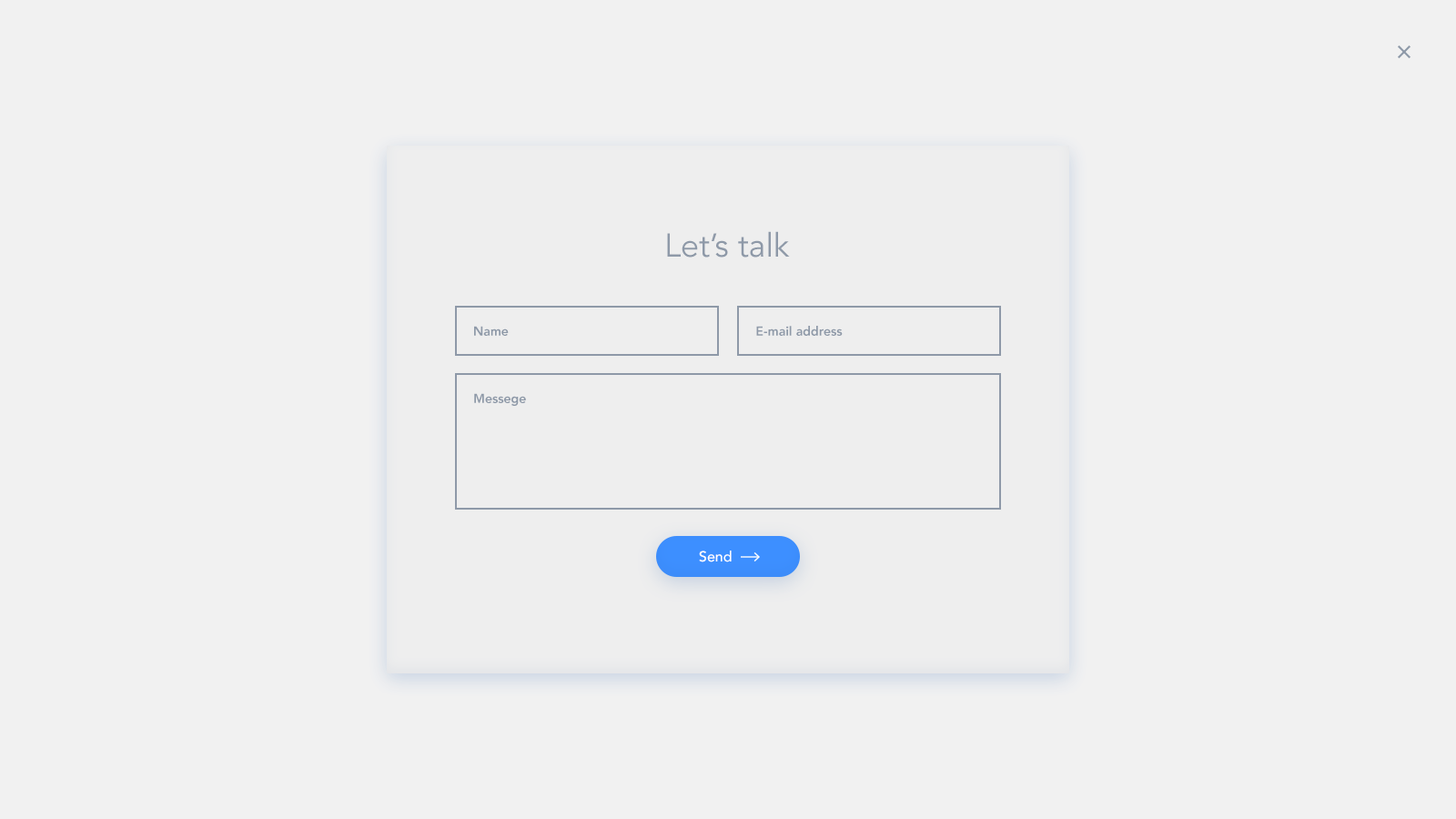
<style>
.page{position:relative;width:1456px;height:819px;background:#f1f1f1}
.page>*{position:absolute;margin:0}
.t1{font:32.8px "Avenir-Book";color:#8e99a8}
.t2{font:12.7px "Avenir-Heavy";color:#8e99a8}
.t3{font:14.6px "Avenir-Medium";color:#ffffff}
</style>
<div class="page">
<p class="t1" style="left:667px;top:231px;width:123px;height:27px">Let’s talk</p>
<p class="t2" style="left:474px;top:326px;width:35px;height:10px">Name</p>
<p class="t2" style="left:756px;top:326px;width:87px;height:10px">E-mail address</p>
<p class="t2" style="left:474px;top:393px;width:52px;height:13px">Messege</p>
<p class="t3" style="left:699px;top:551px;width:33px;height:11px">Send</p>
</div>
